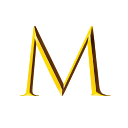
<style>
.page{position:relative;width:128px;height:128px;background:#ffffff}
.page>*{position:absolute;margin:0}
.t1{font:90.9px "TrajanColor-Concept";letter-spacing:-0.075em;text-transform:uppercase}
</style>
<div class="page">
<p class="t1" style="left:19px;top:25px;width:92px;height:71px">M</p>
</div>
